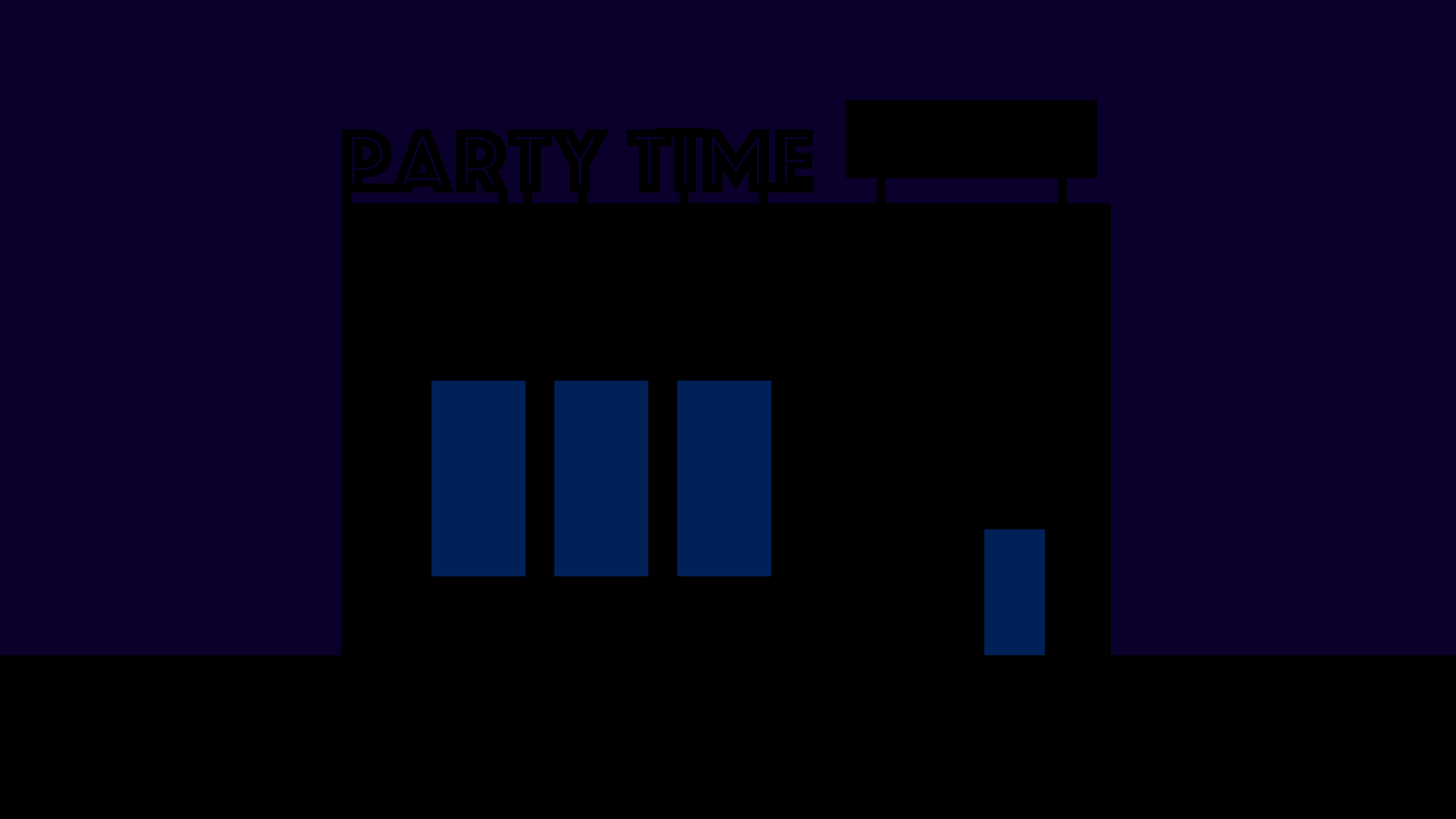
<style>
.page{position:relative;width:1456px;height:819px;background:#0b002b}
.page>*{position:absolute;margin:0}
.t1{font:22.8px "Phosphate-Inline";color:#000000}
</style>
<div class="page">
<p class="t1" style="left:342px;top:129px;width:472px;height:64px">party time</p>
</div>
